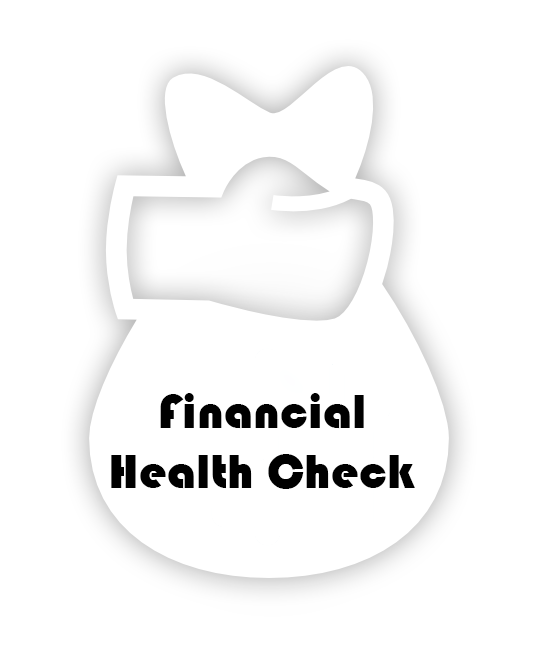
<style>
.page{position:relative;width:536px;height:652px;background:#ffffff}
.page>*{position:absolute;margin:0}
.t1{font:50px "Bauhaus93";color:#000000}
</style>
<div class="page">
<p class="t1" style="left:111px;top:393px;width:304px;height:96px">Financial <br>Health Check</p>
</div>
